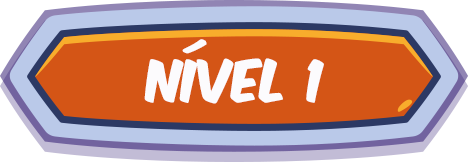
<style>
.page{position:relative;width:469px;height:162px;background:#d45516}
.page>*{position:absolute;margin:0}
.t1{font:50px "KomikaAxis";color:#fcfbfd}
</style>
<div class="page">
<p class="t1" style="left:144px;top:39px;width:180px;height:65px">Nível 1</p>
</div>
